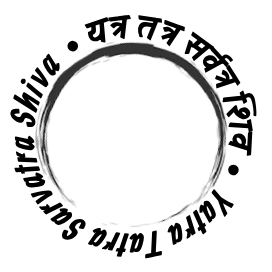
<style>
.page{position:relative;width:272px;height:272px;background:#ffffff}
.page>*{position:absolute;margin:0}
.t1{font:37.7px "Ranga-Bold";color:#000000}
</style>
<div class="page">
<p class="t1" style="left:10px;top:14px;width:247px;height:245px">• यत्र तत्र सर्वत्र शिव •  Yatra Tatra Sarvatra Shiva</p>
</div>
